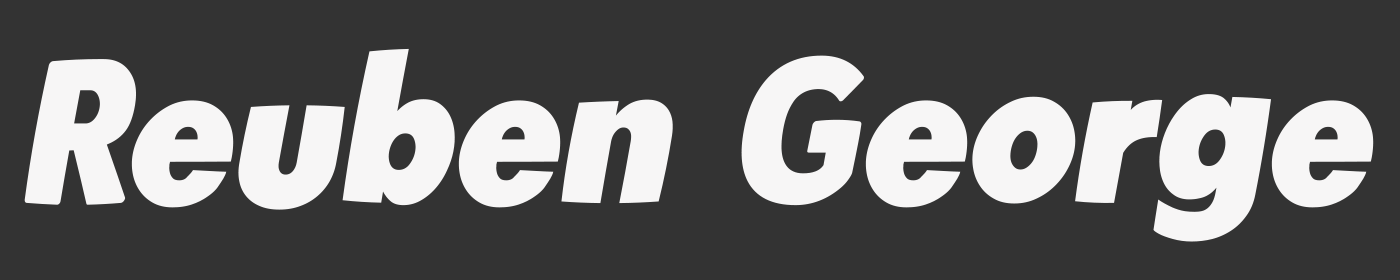
<style>
.page{position:relative;width:1400px;height:280px;background:#333333}
.page>*{position:absolute;margin:0}
.t1{font:203.8px "LeanRegular";color:#f7f6f6;scale:0.84 1}
</style>
<div class="page">
<p class="t1" style="left:24px;top:48px;width:1350px;height:194px">Reuben George</p>
</div>
